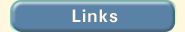
<style>
.page{position:relative;width:185px;height:32px;background:#5982a6}
.page>*{position:absolute;margin:0}
.t1{font:18px "Univers-Bold";letter-spacing:0.05em;color:#fff8de}
</style>
<div class="page">
<p class="t1" style="left:72px;top:9px;width:46px;height:14px">Links</p>
</div>
